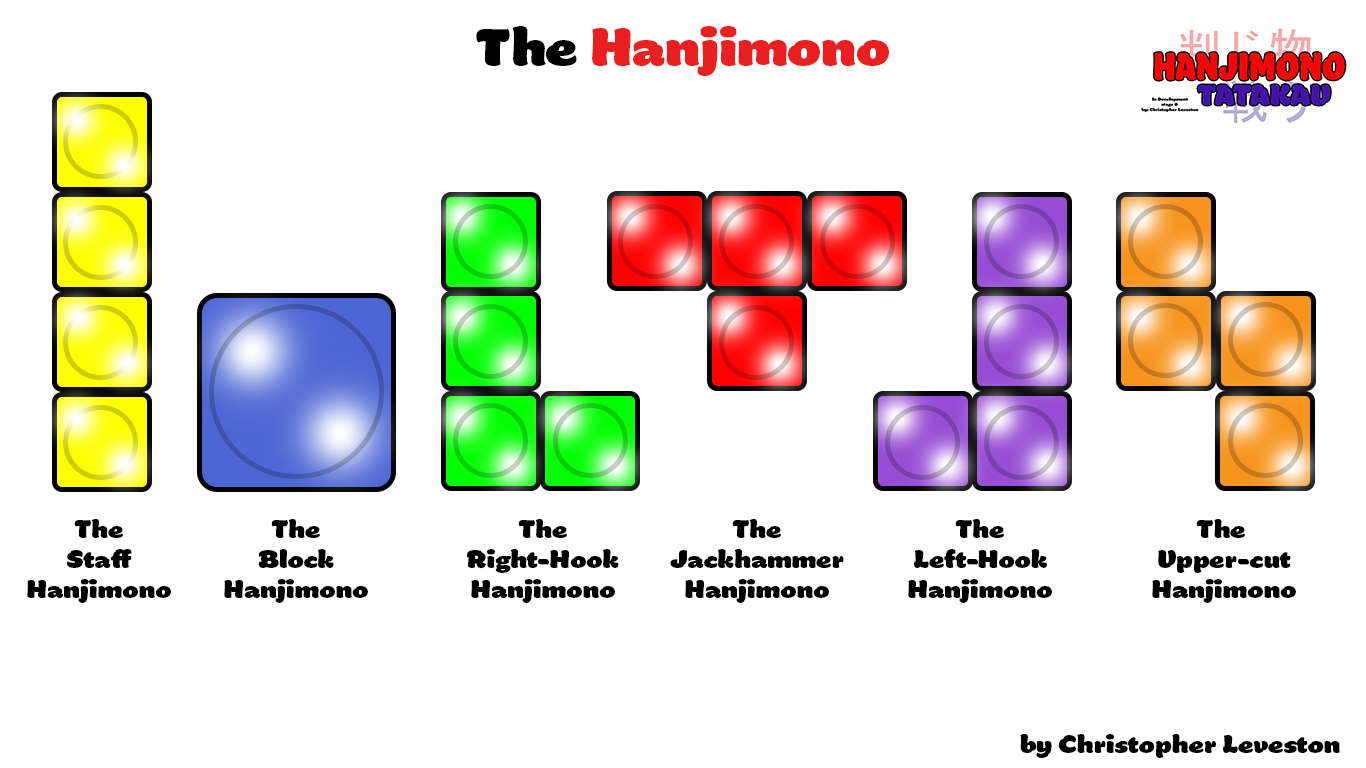
<style>
.page{position:relative;width:1366px;height:768px;background:#ffffff}
.page>*{position:absolute;margin:0}
.t1{font:24.9px "Manteiga-Gorda";color:#ea2020}
.t2{font:24.9px "Manteiga-Gorda";color:#000000}
.t3{font:12px "Manteiga-Gorda";color:#000000}
</style>
<div class="page">
<p class="t1" style="left:476px;top:26px;width:413px;height:50px;text-align:center"><span class="t2">The </span>Hanjimono</p>
<p class="t3" style="left:27px;top:519px;width:144px;height:84px;text-align:center">The<br>Staff<br>Hanjimono</p>
<p class="t3" style="left:224px;top:519px;width:144px;height:84px;text-align:center">The<br>Block<br>Hanjimono</p>
<p class="t3" style="left:467px;top:519px;width:152px;height:84px;text-align:center">The<br>Right-Hook<br>Hanjimono</p>
<p class="t3" style="left:670px;top:519px;width:174px;height:84px;text-align:center">The<br>Jackhammer<br>Hanjimono</p>
<p class="t3" style="left:908px;top:519px;width:144px;height:84px;text-align:center">The<br>Left-Hook<br>Hanjimono</p>
<p class="t3" style="left:1152px;top:519px;width:144px;height:84px;text-align:center">The <br>Upper-cut<br>Hanjimono</p>
<p class="t3" style="left:1020px;top:734px;width:320px;height:24px">by Christopher Leveston</p>
</div>
